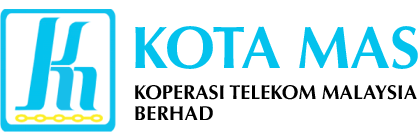
<style>
.page{position:relative;width:420px;height:140px;background:#ffffff}
.page>*{position:absolute;margin:0}
.t1{font:60px "Optima-Bold";letter-spacing:-0.005em;color:#03c2ed;font-variant:small-caps}
.t2{font:20px "Optima-Bold";color:#000000;font-variant:small-caps}
.t3{font:20px "Optima-Bold";letter-spacing:0.01em;color:#000000;font-variant:small-caps}
</style>
<div class="page">
<p class="t1" style="left:135px;top:26px;width:283px;height:43px">KOTA MAS</p>
<p class="t2" style="left:135px;top:85px;width:282px;height:15px">KOPERASI TELEKOM MALAYSIA</p>
<p class="t3" style="left:135px;top:106px;width:78px;height:14px">BERHAD</p>
</div>
